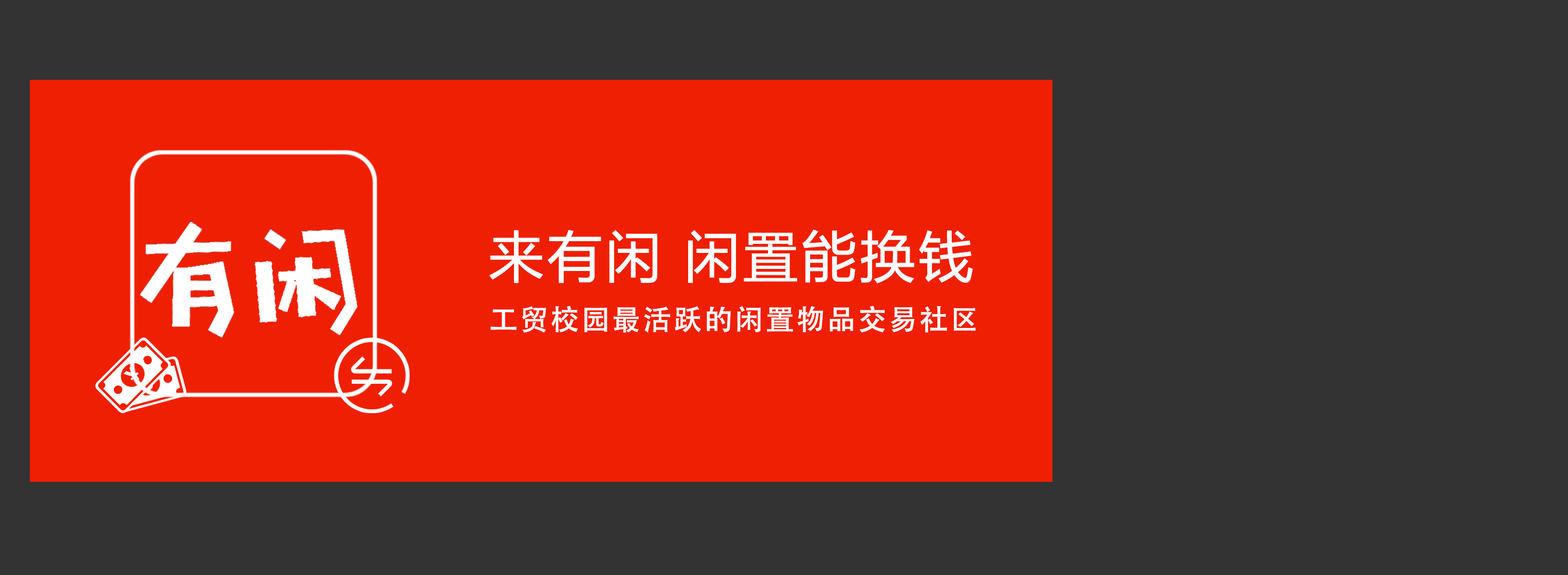
<style>
.page{position:relative;width:1568px;height:575px;background:#333333}
.page>*{position:absolute;margin:0}
.t1{font:54.3px "MicrosoftYaHei";letter-spacing:0.05em;color:#ffffff;font-weight:bold}
.t2{font:28.2px "AdobeHeitiStd-Regular";letter-spacing:0.04em;color:#ffffff;font-weight:bold}
</style>
<div class="page">
<p class="t1" style="left:489px;top:230px;width:484px;height:54px">来有闲 闲置能换钱</p>
<p class="t2" style="left:491px;top:306px;width:485px;height:27px">工贸校园最活跃的闲置物品交易社区</p>
</div>
